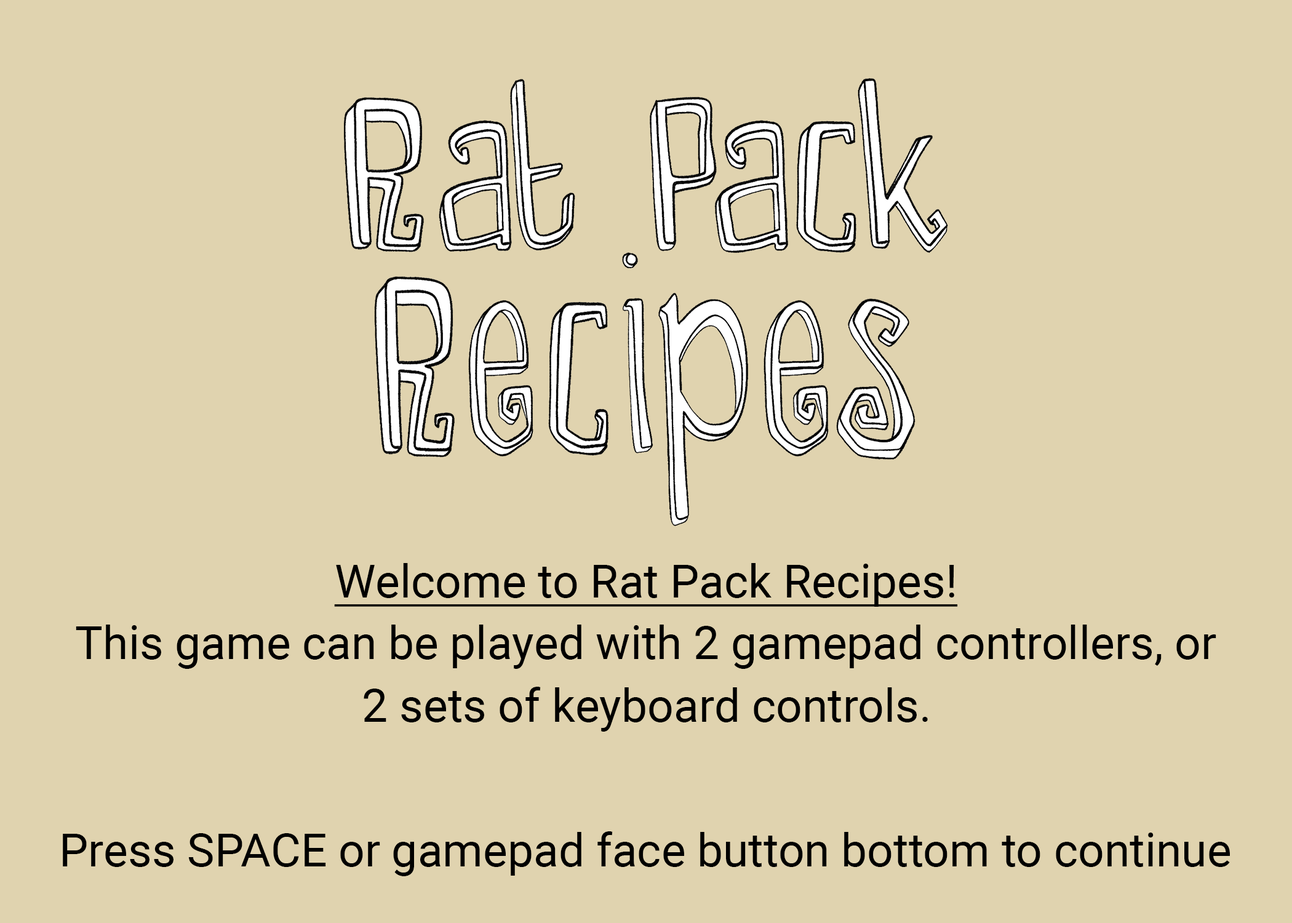
<style>
.page{position:relative;width:1292px;height:923px;background:#e0d3af}
.page>*{position:absolute;margin:0}
.t1{font:46.1px "Roboto-Regular";color:#000000;text-decoration:underline}
.t2{font:46.1px "Roboto-Regular";color:#000000}
</style>
<div class="page">
<p class="t1" style="left:334px;top:563px;width:624px;height:44px">Welcome to Rat Pack Recipes!</p>
<p class="t2" style="left:76px;top:624px;width:1140px;height:45px">This game can be played with 2 gamepad controllers, or</p>
<p class="t2" style="left:364px;top:687px;width:564px;height:45px">2 sets of keyboard controls.</p>
<p class="t2" style="left:63px;top:831px;width:1167px;height:45px">Press SPACE or gamepad face button bottom to continue</p>
</div>
